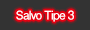
<style>
.page{position:relative;width:90px;height:30px;background:#333333}
.page>*{position:absolute;margin:0}
.t1{font:12px "FutoGoB101Pr5-Bold";letter-spacing:-0.08em;color:#ffffff}
</style>
<div class="page">
<p class="t1" style="left:16px;top:10px;width:58px;height:12px">Salvo Tipe 3</p>
</div>
